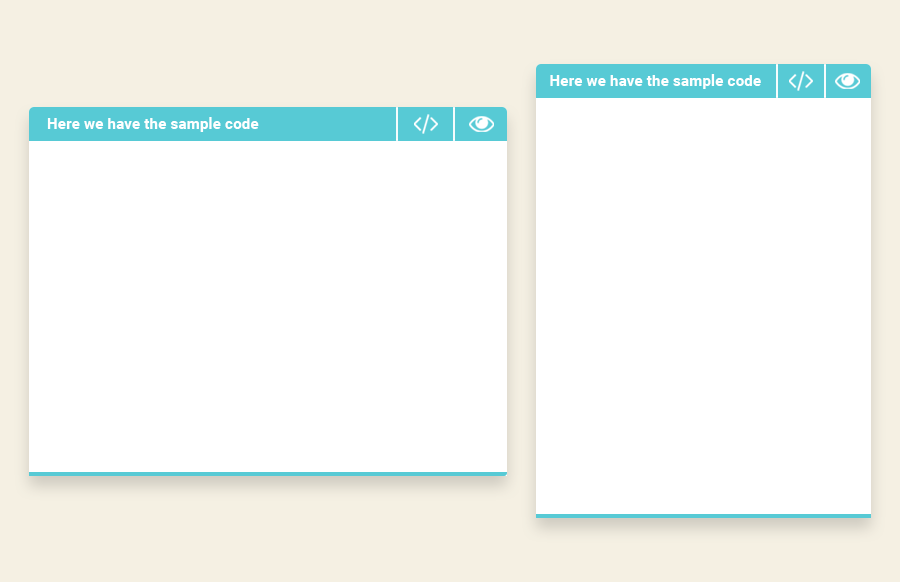
<style>
.page{position:relative;width:900px;height:582px;background:#ffffff}
.page>*{position:absolute;margin:0}
.t1{font:15px "Roboto-Bold";letter-spacing:0.015em;color:#ffffff}
</style>
<div class="page">
<p class="t1" style="left:550px;top:74px;width:211px;height:15px">Here we have the sample code</p>
<p class="t1" style="left:47px;top:117px;width:212px;height:15px">Here we have the sample code</p>
</div>
